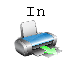
<style>
.page{position:relative;width:71px;height:58px;background:#ffffff}
.page>*{position:absolute;margin:0}
.t1{font:12px "CourierNewPSMT";color:#000000}
</style>
<div class="page">
<p class="t1" style="left:27px;top:7px;width:18px;height:9px">In</p>
</div>
